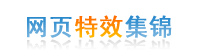
<style>
.page{position:relative;width:201px;height:53px;background:#ffffff}
.page>*{position:absolute;margin:0}
.t1{font:24px "SimHei";font-weight:bold}
</style>
<div class="page">
<p class="t1" style="left:27px;top:15px;width:145px;height:23px">网页    集锦</p>
<p class="t1" style="left:75px;top:15px;width:48px;height:23px">特效</p>
</div>
